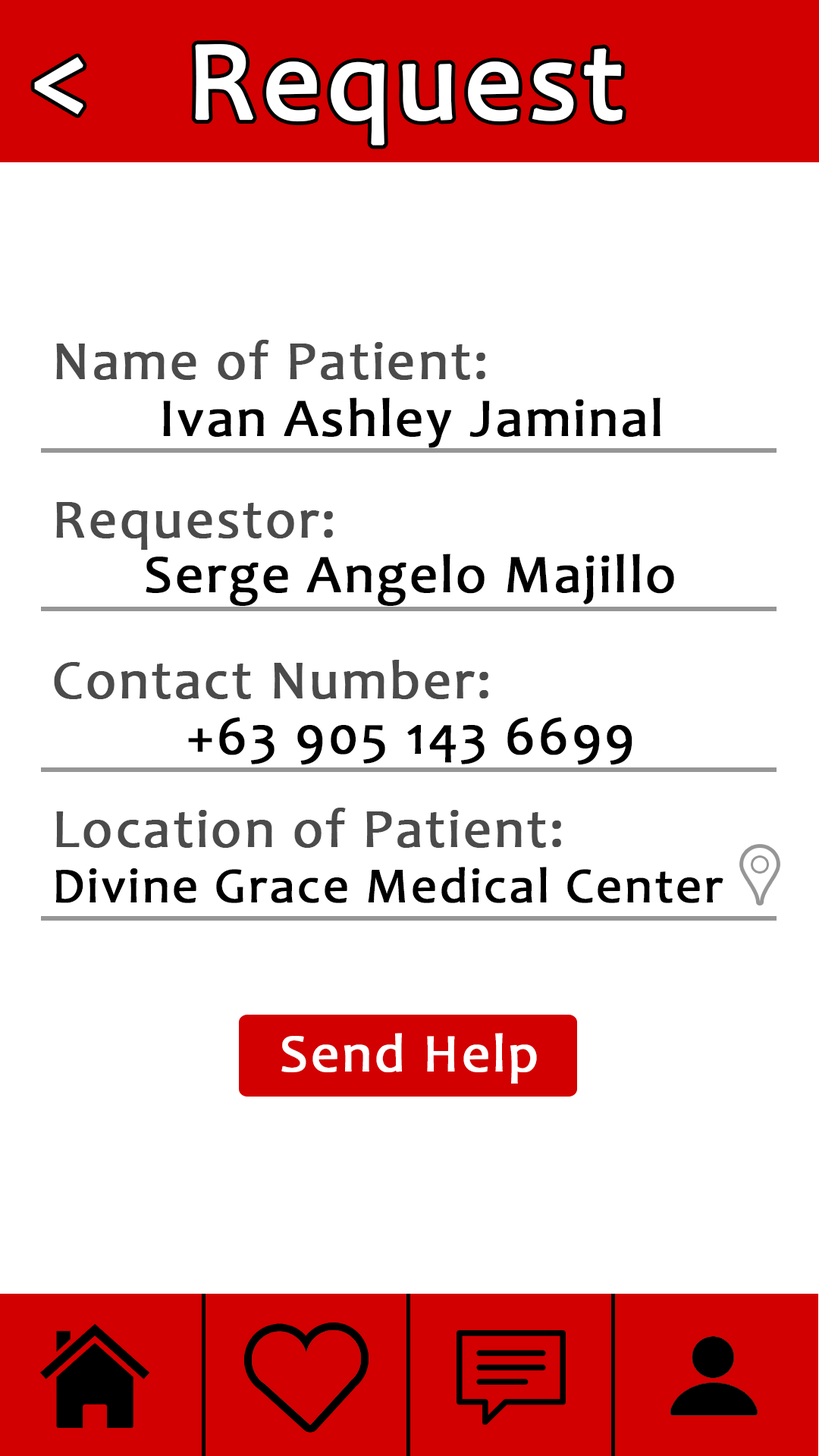
<style>
.page{position:relative;width:819px;height:1456px;background:#ffffff}
.page>*{position:absolute;margin:0}
.t1{font:113.4px "Candara";letter-spacing:0.03em;color:#ffffff;font-weight:bold}
.t2{font:113.7px "Candara";letter-spacing:0.03em;color:#ffffff;font-weight:bold}
.t3{font:54.6px "Candara";letter-spacing:0.03em;color:#4b4b4b;font-weight:bold}
.t4{font:54.3px "Candara";letter-spacing:0.03em;color:#000000;font-weight:bold}
.t5{font:50px "Candara";letter-spacing:0.03em;color:#000000;font-weight:bold}
.t6{font:54.3px "Candara";letter-spacing:0.03em;color:#ffffff;font-weight:bold}
</style>
<div class="page">
<p class="t1" style="left:195px;top:44px;width:428px;height:102px">Request</p>
<p class="t2" style="left:34px;top:57px;width:49px;height:58px">&lt;</p>
<p class="t3" style="left:56px;top:340px;width:429px;height:40px">Name of Patient:</p>
<p class="t4" style="left:163px;top:397px;width:497px;height:51px">Ivan Ashley Jaminal</p>
<p class="t3" style="left:56px;top:502px;width:277px;height:48px">Requestor:</p>
<p class="t4" style="left:146px;top:554px;width:528px;height:52px">Serge Angelo Majillo</p>
<p class="t3" style="left:54px;top:660px;width:434px;height:39px">Contact Number:</p>
<p class="t4" style="left:188px;top:717px;width:444px;height:48px">+63 905 143 6699</p>
<p class="t3" style="left:56px;top:808px;width:505px;height:40px">Location of Patient:</p>
<p class="t5" style="left:56px;top:867px;width:667px;height:36px">Divine Grace Medical Center</p>
<p class="t6" style="left:281px;top:1033px;width:256px;height:51px">Send Help</p>
</div>
